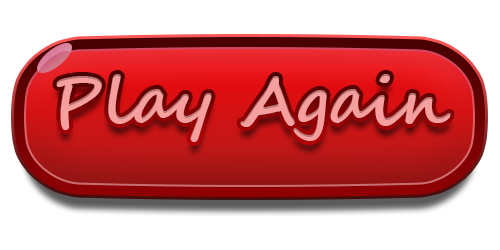
<style>
.page{position:relative;width:500px;height:250px;background:#ffffff}
.page>*{position:absolute;margin:0}
.t1{font:66.7px "SegoeScript-Bold";color:#f59f9f}
</style>
<div class="page">
<p class="t1" style="left:56px;top:74px;width:395px;height:68px">Play Again</p>
</div>
